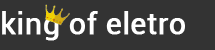
<style>
.page{position:relative;width:215px;height:50px;background:#333333}
.page>*{position:absolute;margin:0}
.t1{font:30px "Roboto-Regular";color:#ffffff;font-weight:bold}
</style>
<div class="page">
<p class="t1" style="left:2px;top:11px;width:183px;height:30px">king of eletro</p>
</div>
